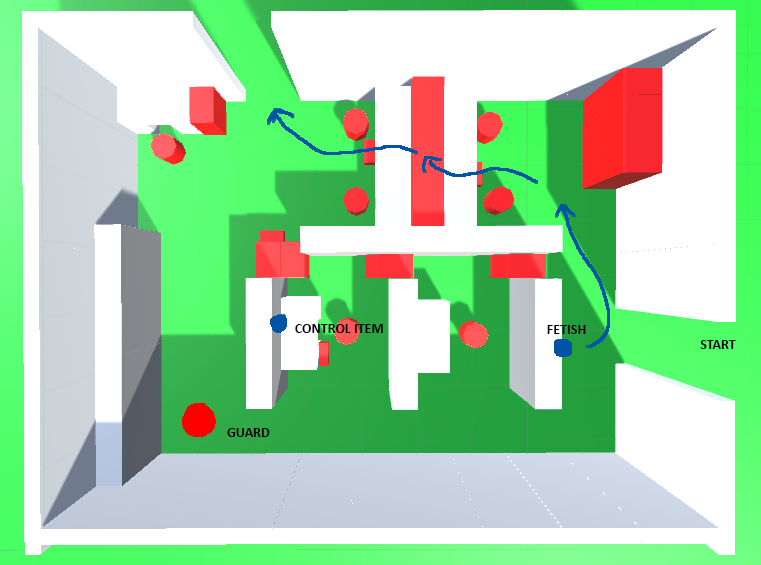
<style>
.page{position:relative;width:761px;height:565px;background:#ffffff}
.page>*{position:absolute;margin:0}
.t1{font:14px "Calibri-Bold";color:#000000}
</style>
<div class="page">
<p class="t1" style="left:295px;top:324px;width:88px;height:9px">CONTROL ITEM</p>
<p class="t1" style="left:547px;top:325px;width:39px;height:9px">FETISH</p>
<p class="t1" style="left:700px;top:340px;width:36px;height:9px">START</p>
<p class="t1" style="left:227px;top:428px;width:43px;height:9px">GUARD</p>
</div>
